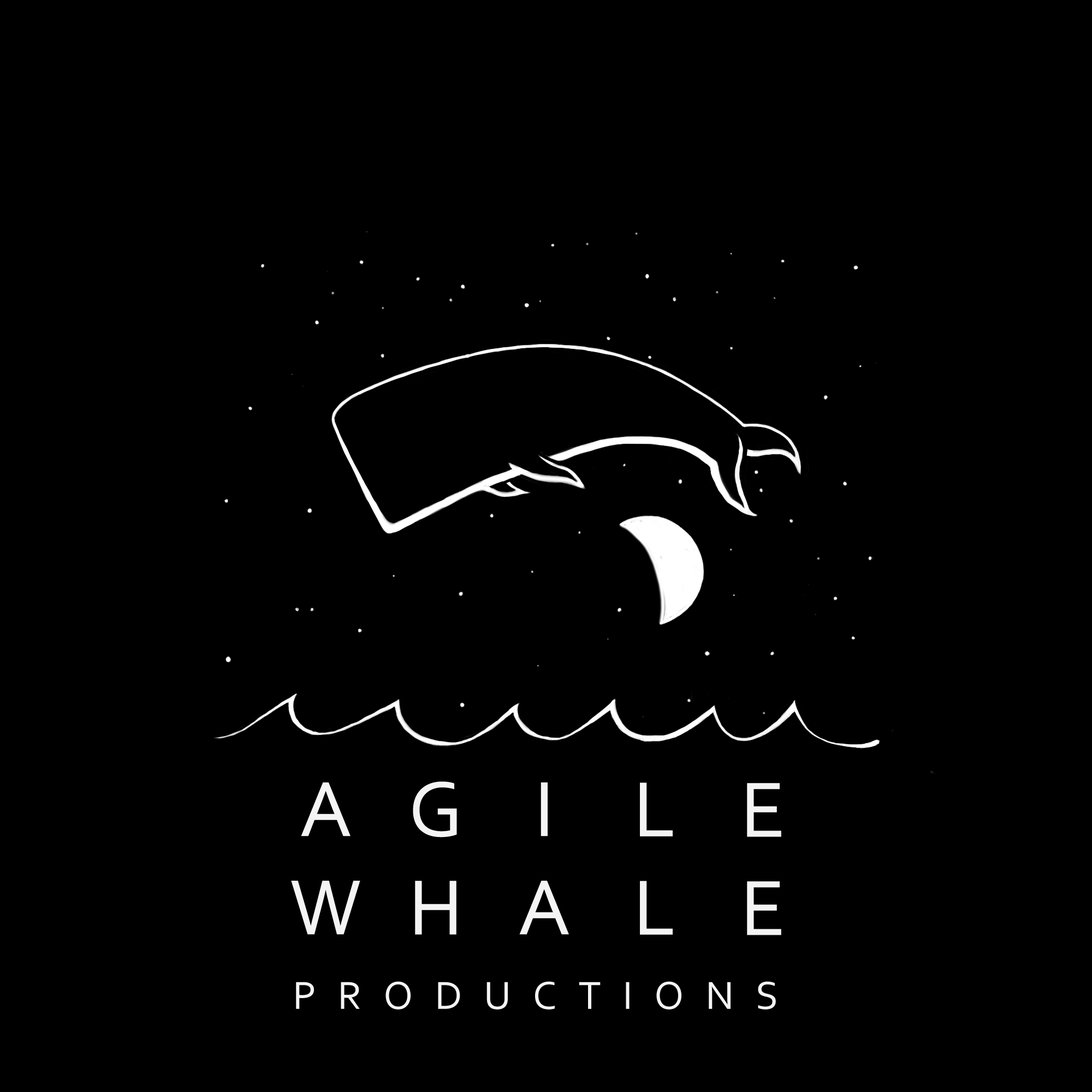
<style>
.page{position:relative;width:1092px;height:1092px;background:#000000}
.page>*{position:absolute;margin:0}
.t1{font:81.9px "Corbel";letter-spacing:0.6em;color:#f4f4f4}
.t2{font:40.9px "Corbel";letter-spacing:0.525em;color:#f4f4f4}
</style>
<div class="page">
<p class="t1" style="left:291px;top:782px;width:69px;height:153px;text-align:center">A<br>W</p>
<p class="t1" style="left:413px;top:781px;width:44px;height:154px;text-align:center">G<br>H</p>
<p class="t1" style="left:519px;top:782px;width:50px;height:153px;text-align:center">I<br>A</p>
<p class="t1" style="left:640px;top:782px;width:33px;height:153px;text-align:center">L<br>L</p>
<p class="t1" style="left:747px;top:783px;width:34px;height:152px;text-align:center">E<br>E</p>
<p class="t2" style="left:296px;top:981px;width:480px;height:29px">PRODUCTIONS</p>
</div>
